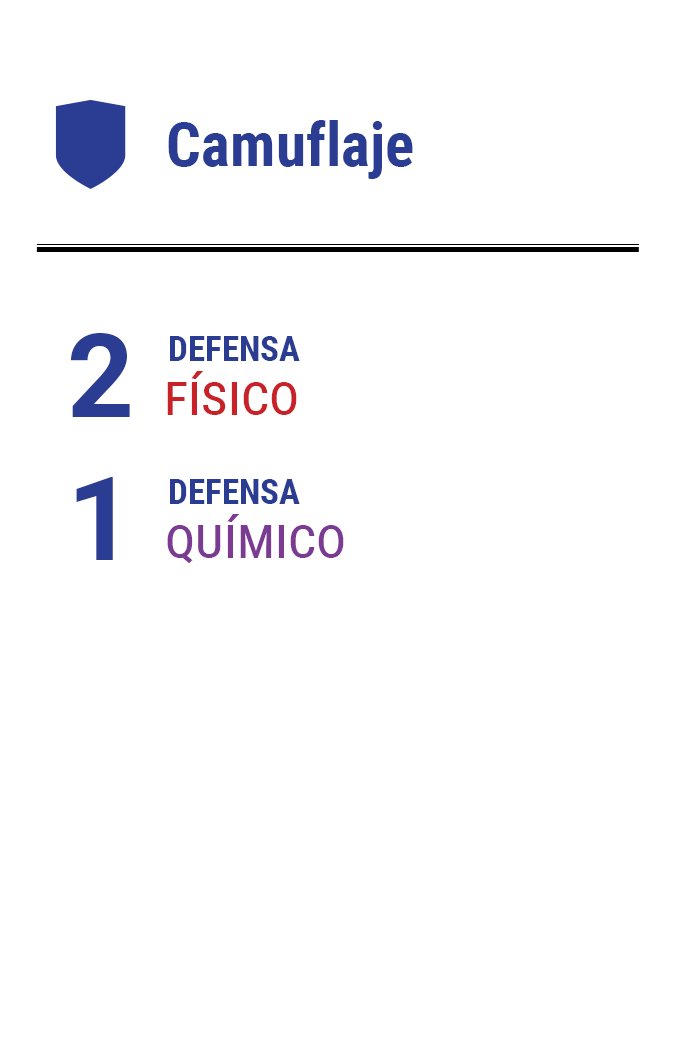
<style>
.page{position:relative;width:675px;height:1050px;background:#ffffff}
.page>*{position:absolute;margin:0}
.t1{font:61.2px "RobotoCondensed-Bold";color:#2a3d93}
.t2{font:116.7px "Roboto-Bold";letter-spacing:-0.16em;color:#2a3d93}
.t3{font:35px "RobotoCondensed-Bold";color:#2a3d93}
.t4{font:58.3px "RobotoCondensed-Regular";color:#c82127;font-variant:small-caps}
.t5{font:58.3px "RobotoCondensed-Regular";color:#7c3b92;font-variant:small-caps}
</style>
<div class="page">
<p class="t1" style="left:168px;top:120px;width:245px;height:59px">Camuflaje</p>
<p class="t2" style="left:71px;top:333px;width:59px;height:84px">2</p>
<p class="t3" style="left:170px;top:336px;width:130px;height:25px">DEFENSA</p>
<p class="t4" style="left:167px;top:371px;width:130px;height:44px">físico</p>
<p class="t2" style="left:76px;top:477px;width:37px;height:83px">1</p>
<p class="t3" style="left:170px;top:479px;width:130px;height:25px">DEFENSA</p>
<p class="t5" style="left:167px;top:514px;width:177px;height:50px">químico</p>
</div>
